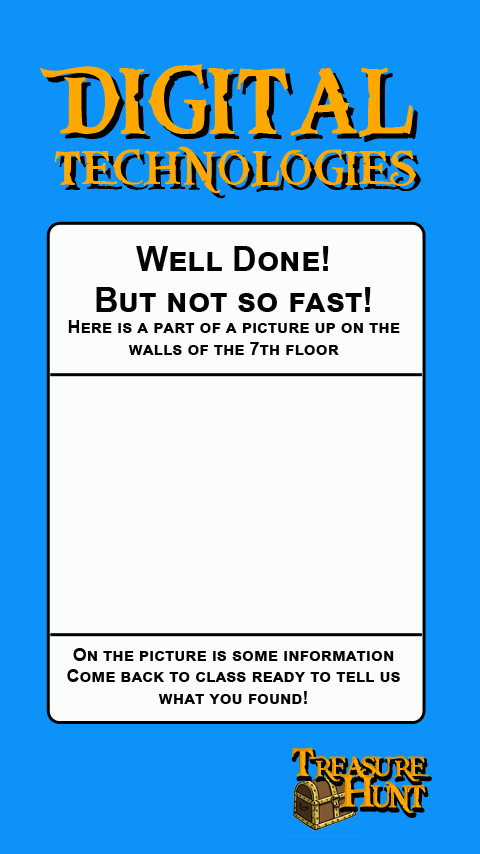
<style>
.page{position:relative;width:480px;height:854px;background:#0c92f9}
.page>*{position:absolute;margin:0}
.t1{font:50.8px/50.1px "PiecesofEight";color:#fea801;font-variant:small-caps}
.t2{font:99px "PiecesofEight";color:#fea801;font-variant:small-caps}
.t3{font:50.8px/50.1px "PiecesofEight";font-variant:small-caps}
.t4{font:99px "PiecesofEight";font-variant:small-caps}
.t5{font:18px "Arial-BoldMT";color:#020202;font-variant:small-caps}
.t6{font:33.9px "Arial-BoldMT";color:#020202;font-variant:small-caps}
.t7{font:42.4px/31.3px "PiecesofEight";letter-spacing:-0.12em;font-variant:small-caps}
.t8{font:48.5px/31.3px "PiecesofEight";letter-spacing:-0.12em;font-variant:small-caps}
</style>
<div class="page">
<p class="t1" style="left:39px;top:64px;width:378px;height:130px;text-align:center"><span class="t2">DIGITAL<br></span>TECHNOLOGIES</p>
<p class="t3" style="left:44px;top:69px;width:378px;height:130px;text-align:center"><span class="t4">DIGITAL<br></span>TECHNOLOGIES</p>
<p class="t5" style="left:68px;top:246px;width:332px;height:109px;text-align:center"><span class="t6">Well Done!<br>But not so fast!<br></span>Here is a part of a picture up on the<br>walls of the 7th floor</p>
<p class="t5" style="left:67px;top:648px;width:333px;height:56px;text-align:center">On the picture is some information<br>Come back to class ready to tell us<br>what you found!</p>
<p class="t7" style="left:291px;top:747px;width:138px;height:66px;text-align:right">Treasure<br><span class="t8">Hunt</span></p>
<p class="t7" style="left:293px;top:751px;width:138px;height:66px;text-align:right">Treasure<br><span class="t8">Hunt</span></p>
</div>
